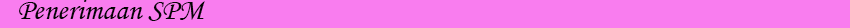
<style>
.page{position:relative;width:850px;height:28px;background:#f97def}
.page>*{position:absolute;margin:0}
.t1{font:30px "MonotypeCorsiva";color:#050405}
</style>
<div class="page">
<p class="t1" style="left:19px;top:0px;width:186px;height:21px">Penerimaan SPM</p>
</div>
